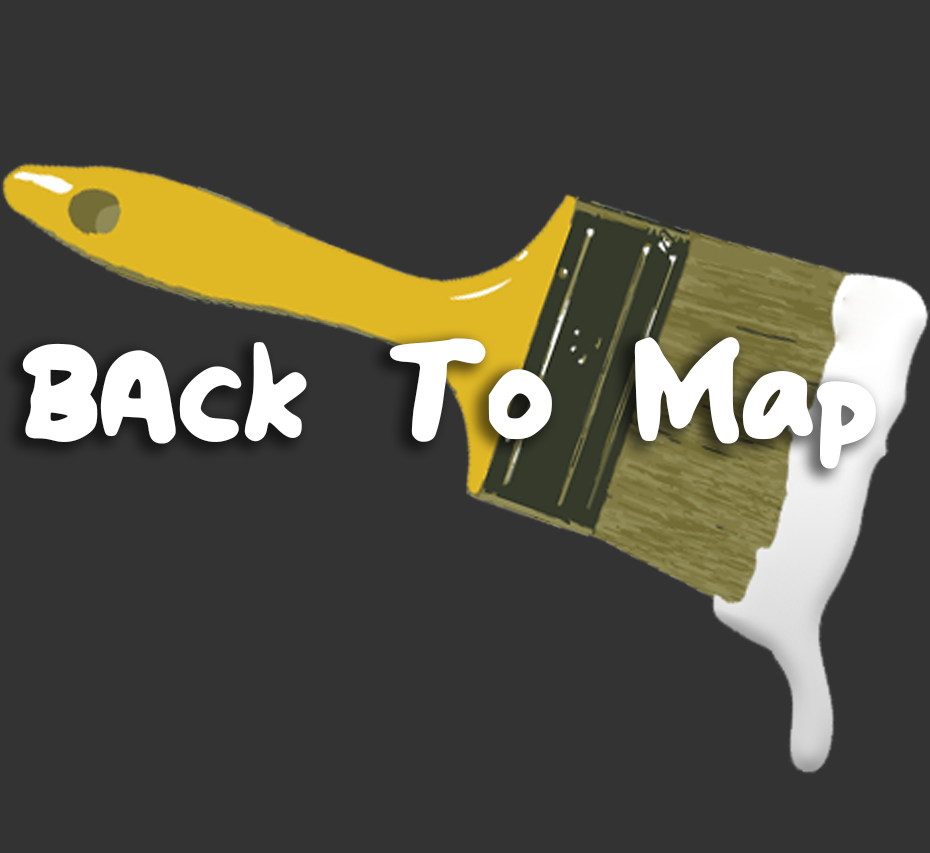
<style>
.page{position:relative;width:930px;height:853px;background:#333333}
.page>*{position:absolute;margin:0}
.t1{font:190px "Sile";color:#ffffff}
</style>
<div class="page">
<p class="t1" style="left:22px;top:337px;width:854px;height:132px">BAck To Map</p>
</div>
